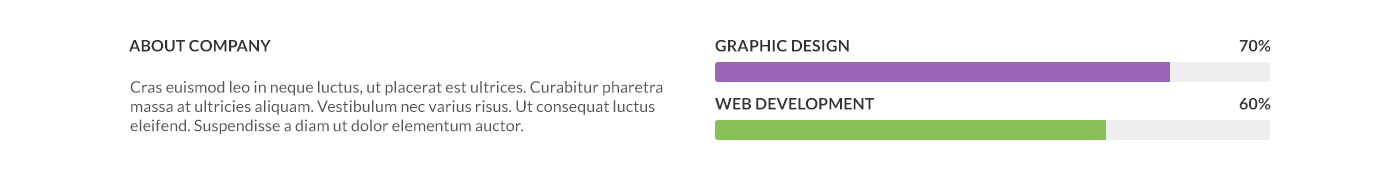
<style>
.page{position:relative;width:1400px;height:180px;background:#ffffff}
.page>*{position:absolute;margin:0}
.t1{font:16px "Lato-Bold";letter-spacing:0.01em;color:#333333}
.t2{font:16px "Lato-Regular";letter-spacing:0.005em;color:#555555}
</style>
<div class="page">
<p class="t1" style="left:129px;top:40px;width:142px;height:12px">ABOUT COMPANY</p>
<p class="t1" style="left:715px;top:40px;width:134px;height:12px">GRAPHIC DESIGN</p>
<p class="t1" style="left:1239px;top:39px;width:32px;height:13px">70%</p>
<p class="t2" style="left:130px;top:81px;width:533px;height:53px">Cras euismod leo in neque luctus, ut placerat est ultrices. Curabitur pharetra massa at ultricies aliquam. Vestibulum nec varius risus. Ut consequat luctus eleifend. Suspendisse a diam ut dolor elementum auctor.</p>
<p class="t1" style="left:715px;top:98px;width:159px;height:12px">WEB DEVELOPMENT</p>
<p class="t1" style="left:1239px;top:97px;width:32px;height:13px">60%</p>
</div>
